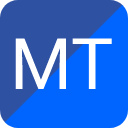
<style>
.page{position:relative;width:128px;height:128px;background:#0065ff}
.page>*{position:absolute;margin:0}
.t1{font:71px "Roboto-Regular";color:#ffffff}
</style>
<div class="page">
<p class="t1" style="left:15px;top:38px;width:97px;height:51px">MT</p>
</div>
